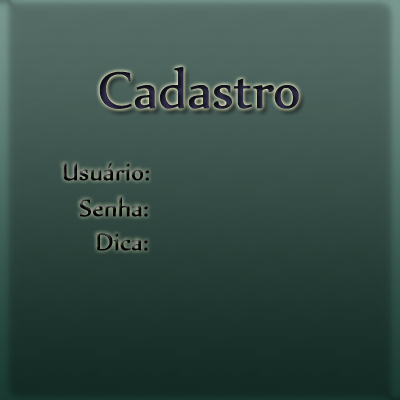
<style>
.page{position:relative;width:400px;height:400px}
.page>*{position:absolute;margin:0}
.t1{font:62.5px "Nyala-Regular";color:#1c1b2d}
.t2{font:29.2px "Nyala-Regular"}
.t3{font:29.2px "Nyala-Regular";color:#030305}
</style>
<div class="page">
<p class="t1" style="left:99px;top:66px;width:200px;height:43px">Cadastro</p>
<p class="t2" style="left:61px;top:163px;width:88px;height:18px">Usuário:</p>
<p class="t2" style="left:79px;top:196px;width:69px;height:21px">Senha:</p>
<p class="t3" style="left:95px;top:233px;width:53px;height:18px">Dica:</p>
</div>
